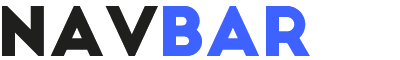
<style>
.page{position:relative;width:400px;height:60px;background:#ffffff}
.page>*{position:absolute;margin:0}
.t1{font:66.2px "BigJohn";color:#1f1f1e}
.t2{font:66.2px "BigJohn";color:#3e62ff}
</style>
<div class="page">
<p class="t1" style="left:2px;top:6px;width:308px;height:50px">Nav<span class="t2">Bar</span></p>
</div>
